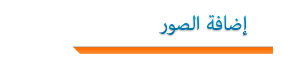
<style>
.page{position:relative;width:282px;height:69px;background:#ffffff}
.page>*{position:absolute;margin:0}
.t1{font:28px "AdobeArabic-Regular";color:#0079ac}
</style>
<div class="page">
<p class="t1" style="left:159px;top:15px;width:89px;height:21px">إضافة الصور</p>
</div>
